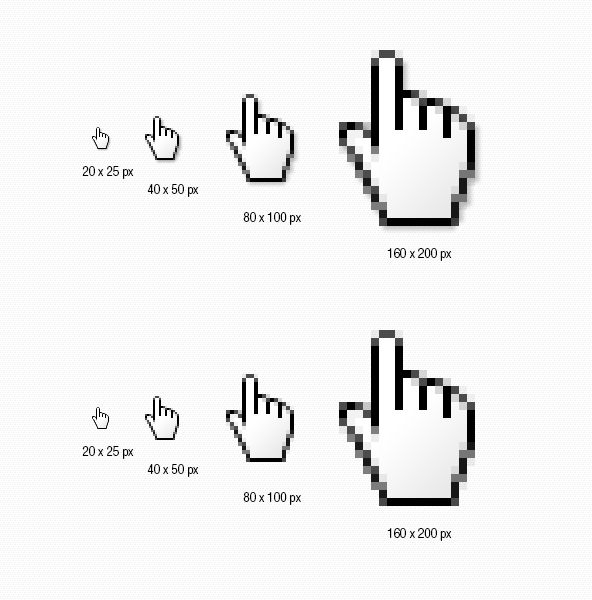
<style>
.page{position:relative;width:592px;height:600px;background:#ffffff}
.page>*{position:absolute;margin:0}
.t1{font:13.3px "HelveticaNeueLTStd-LtCn";color:#000000}
</style>
<div class="page">
<p class="t1" style="left:82px;top:166px;width:52px;height:13px">20 x 25 px</p>
<p class="t1" style="left:147px;top:184px;width:52px;height:13px">40 x 50 px</p>
<p class="t1" style="left:243px;top:212px;width:58px;height:13px">80 x 100 px</p>
<p class="t1" style="left:387px;top:248px;width:65px;height:13px">160 x 200 px</p>
<p class="t1" style="left:82px;top:446px;width:52px;height:13px">20 x 25 px</p>
<p class="t1" style="left:147px;top:464px;width:52px;height:13px">40 x 50 px</p>
<p class="t1" style="left:243px;top:492px;width:58px;height:13px">80 x 100 px</p>
<p class="t1" style="left:387px;top:528px;width:65px;height:13px">160 x 200 px</p>
</div>
